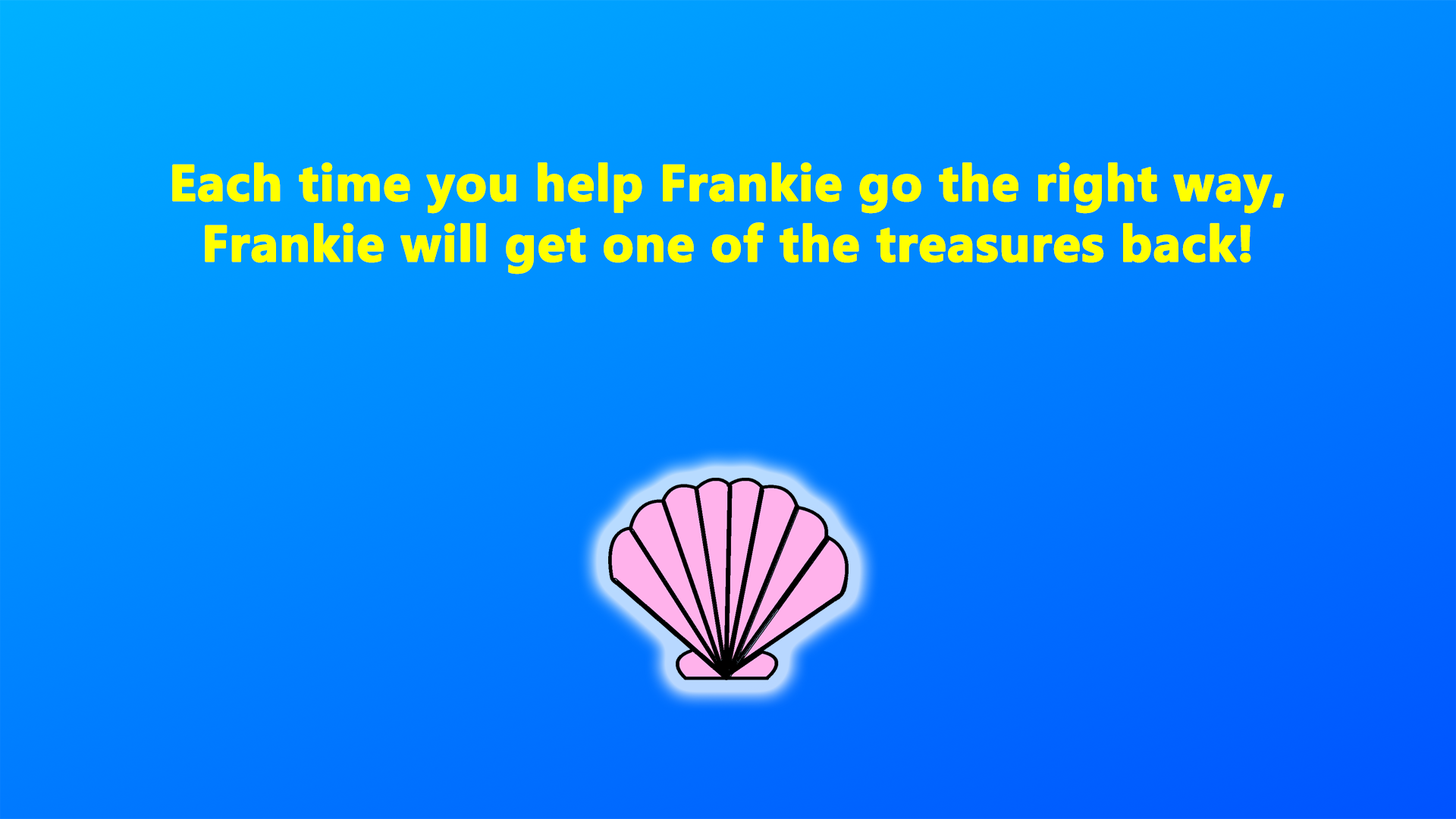
<style>
.page{position:relative;width:1456px;height:819px}
.page>*{position:absolute;margin:0}
.t1{font:50.6px "MyanmarText-Bold";color:#ffff00;font-weight:bold}
</style>
<div class="page">
<p class="t1" style="left:172px;top:162px;width:1113px;height:113px;text-align:center">Each time you help Frankie go the right way,<br>Frankie will get one of the treasures back!</p>
</div>
